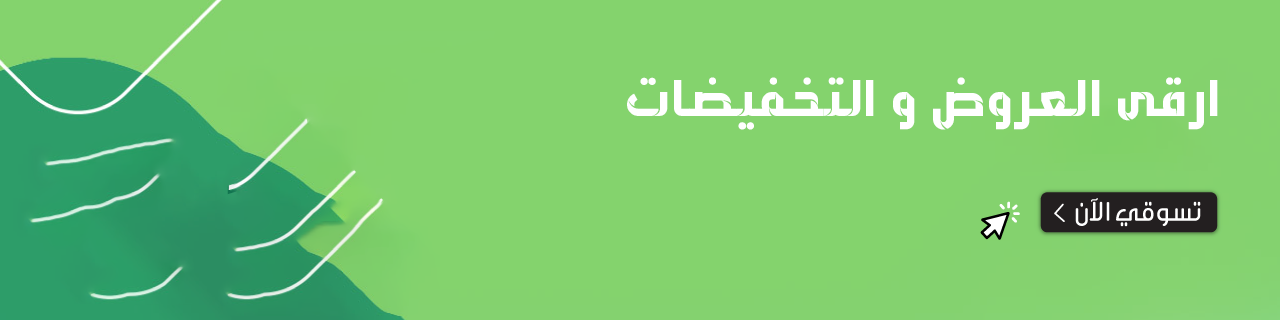
<style>
.page{position:relative;width:1280px;height:320px;background:#84d36d}
.page>*{position:absolute;margin:0}
.t1{font:60px "AraAlmBon-Regular";color:#ffffff}
</style>
<div class="page">
<p class="t1" style="left:627px;top:77px;width:591px;height:53px">ارقى العروض و التخفيضات</p>
</div>
